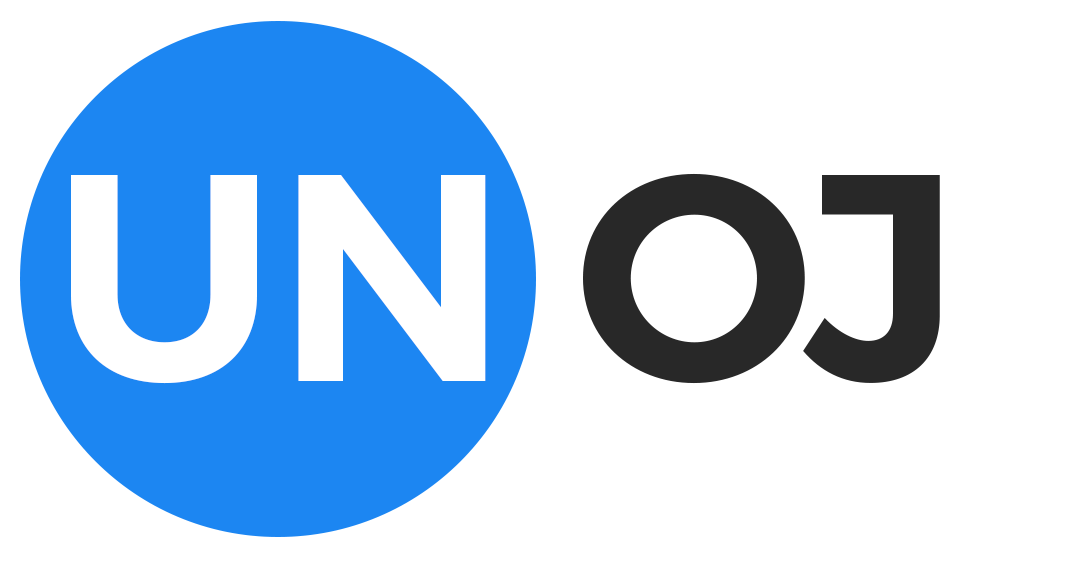
<style>
.page{position:relative;width:1092px;height:565px;background:#ffffff}
.page>*{position:absolute;margin:0}
.t1{font:294.6px "Montserrat-SemiBold";color:#282828}
.t2{font:294.6px "Montserrat-SemiBold";color:#ffffff}
</style>
<div class="page">
<p class="t1" style="left:583px;top:173px;width:357px;height:211px">OJ</p>
<p class="t2" style="left:71px;top:175px;width:415px;height:209px">UN</p>
</div>
